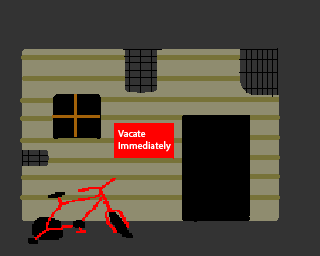
<style>
.page{position:relative;width:320px;height:256px;background:#333333}
.page>*{position:absolute;margin:0}
.t1{font:10px "MyriadPro-Regular";color:#ffffff}
</style>
<div class="page">
<p class="t1" style="left:118px;top:130px;width:53px;height:22px">Vacate <br>Immediately</p>
</div>
